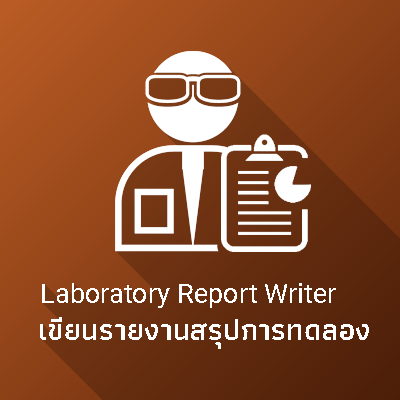
<style>
.page{position:relative;width:400px;height:400px}
.page>*{position:absolute;margin:0}
.t1{font:26.5px "Roboto-Regular";letter-spacing:0.01em;color:#ffffff}
.t2{font:30px "Athiti-SemiBold";letter-spacing:0.01em;color:#ffffff}
</style>
<div class="page">
<p class="t1" style="left:42px;top:283px;width:294px;height:25px">Laboratory Report Writer</p>
<p class="t2" style="left:40px;top:317px;width:329px;height:32px">เขียนรายงานสรุปการทดลอง</p>
</div>
